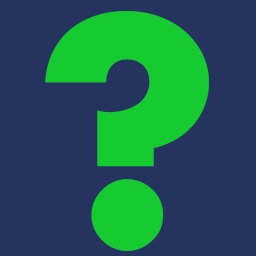
<style>
.page{position:relative;width:256px;height:256px;background:#25335f}
.page>*{position:absolute;margin:0}
.t1{font:345.4px "FuturaPT-Bold";color:#16cb30}
</style>
<div class="page">
<p class="t1" style="left:45px;top:11px;width:164px;height:240px">?</p>
</div>
